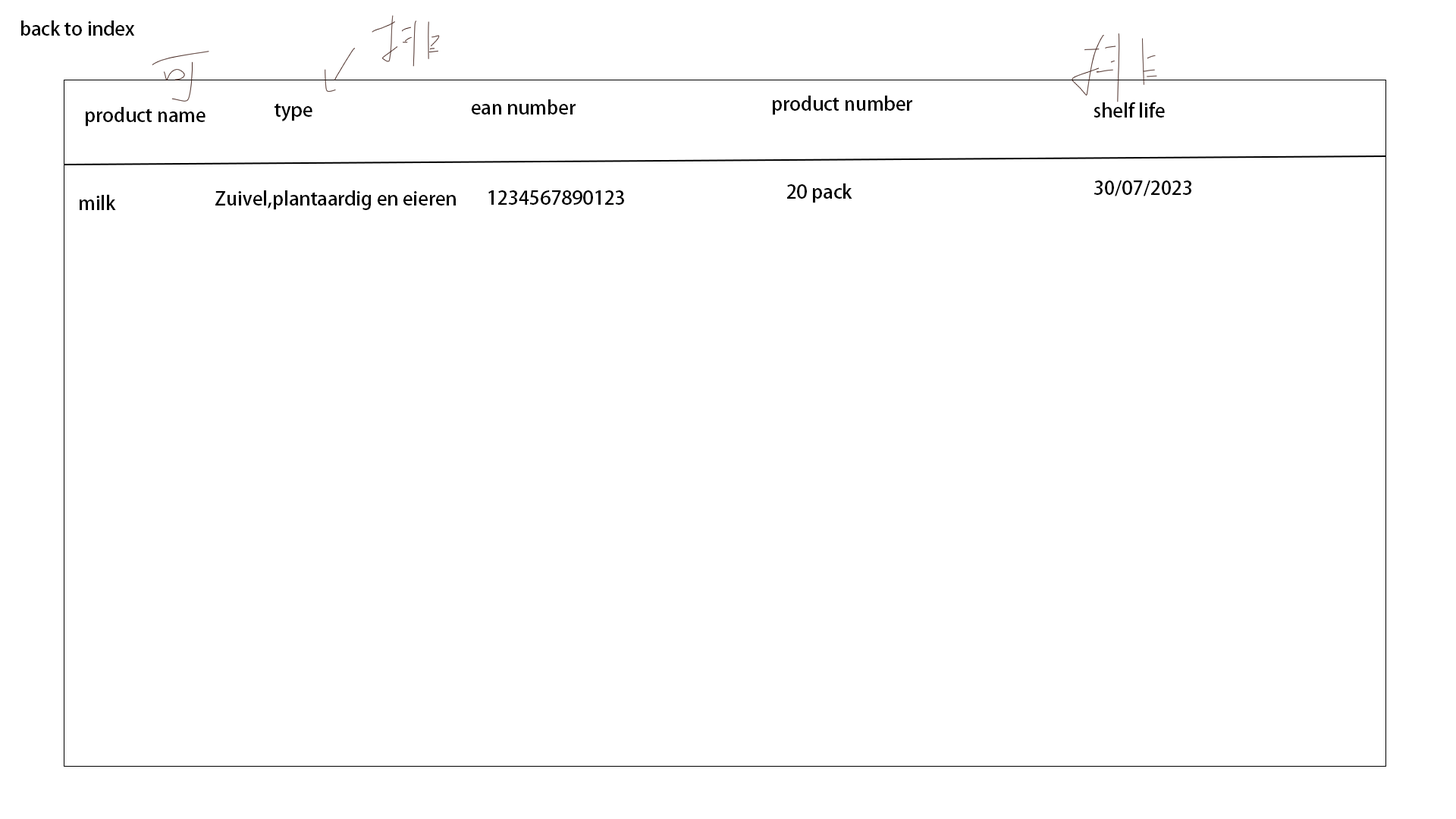
<style>
.page{position:relative;width:1456px;height:819px;background:#ffffff}
.page>*{position:absolute;margin:0}
.t1{font:19px "AdobeHeitiStd-Regular";color:#000000}
</style>
<div class="page">
<p class="t1" style="left:21px;top:20px;width:114px;height:16px">back to index</p>
<p class="t1" style="left:472px;top:99px;width:104px;height:16px">ean number</p>
<p class="t1" style="left:773px;top:96px;width:139px;height:19px">product number</p>
<p class="t1" style="left:1094px;top:102px;width:71px;height:16px">shelf life</p>
<p class="t1" style="left:86px;top:107px;width:120px;height:20px">product name</p>
<p class="t1" style="left:275px;top:103px;width:37px;height:18px">type</p>
<p class="t1" style="left:787px;top:183px;width:65px;height:20px">20 pack</p>
<p class="t1" style="left:1094px;top:180px;width:97px;height:16px">30/07/2023</p>
<p class="t1" style="left:80px;top:194px;width:36px;height:16px">milk</p>
<p class="t1" style="left:215px;top:190px;width:241px;height:20px">Zuivel,plantaardig en eieren</p>
<p class="t1" style="left:488px;top:190px;width:136px;height:15px">1234567890123</p>
</div>
